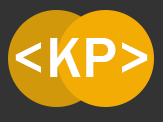
<style>
.page{position:relative;width:163px;height:122px;background:#333333}
.page>*{position:absolute;margin:0}
.t1{font:58.3px "FranklinGothic-Medium";color:#ffffff}
</style>
<div class="page">
<p class="t1" style="left:15px;top:38px;width:133px;height:39px">&lt;KP&gt;</p>
</div>
